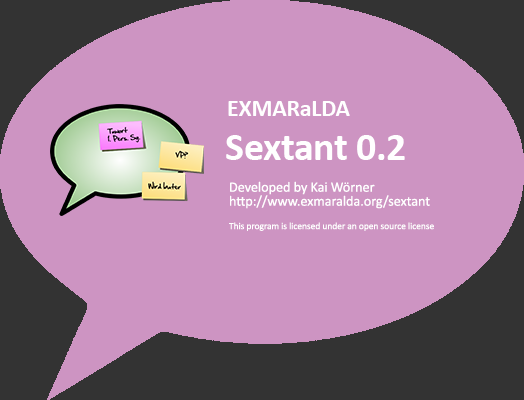
<style>
.page{position:relative;width:524px;height:400px;background:#cd94c2}
.page>*{position:absolute;margin:0}
.t1{font:23.8px "Calibri-Bold";letter-spacing:-0.005em;color:#ffffff}
.t2{font:39.6px "Calibri-Bold";letter-spacing:-0.005em;color:#ffffff}
.t3{font:14.3px/14px "Calibri";letter-spacing:-0.005em;color:#ffffff}
.t4{font:9.5px "Calibri";letter-spacing:-0.005em;color:#ffffff}
</style>
<div class="page">
<p class="t1" style="left:228px;top:101px;width:122px;height:15px">EXMARaLDA</p>
<p class="t2" style="left:226px;top:135px;width:179px;height:25px">Sextant 0.2</p>
<p class="t3" style="left:229px;top:181px;width:205px;height:50px">Developed by Kai Wörner<br>http://www.exmaralda.org/sextant<br><br><span class="t4">This program is licensed under an open source license</span></p>
</div>
